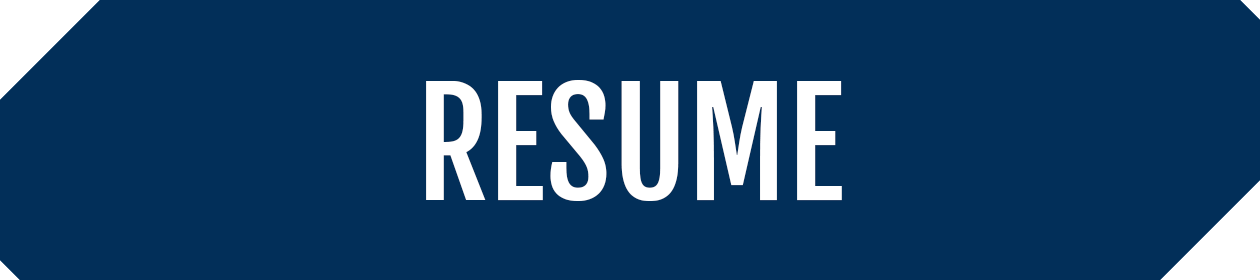
<style>
.page{position:relative;width:1260px;height:280px;background:#022f59}
.page>*{position:absolute;margin:0}
.t1{font:141.7px "FjallaOne-Regular";color:#ffffff}
</style>
<div class="page">
<p class="t1" style="left:426px;top:80px;width:416px;height:121px">RESUME</p>
<p class="t1" style="left:426px;top:80px;width:416px;height:121px">RESUME</p>
</div>
